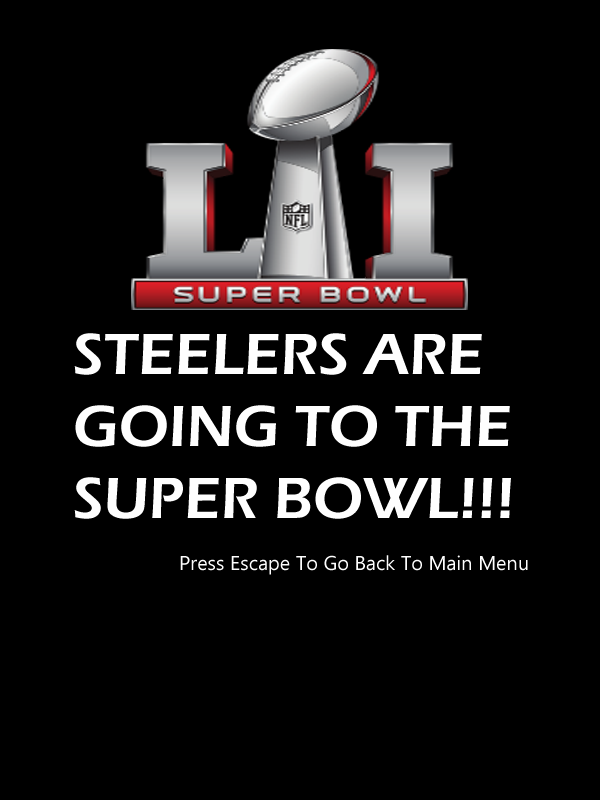
<style>
.page{position:relative;width:600px;height:800px;background:#000000}
.page>*{position:absolute;margin:0}
.t1{font:60px "ErasITC-Demi";color:#fefefe}
.t2{font:20px "Ebrima";color:#fefefe}
</style>
<div class="page">
<p class="t1" style="left:74px;top:333px;width:437px;height:186px">STEELERS ARE <br>GOING TO THE <br>SUPER BOWL!!!</p>
<p class="t2" style="left:180px;top:555px;width:348px;height:20px">Press Escape To Go Back To Main Menu</p>
</div>
